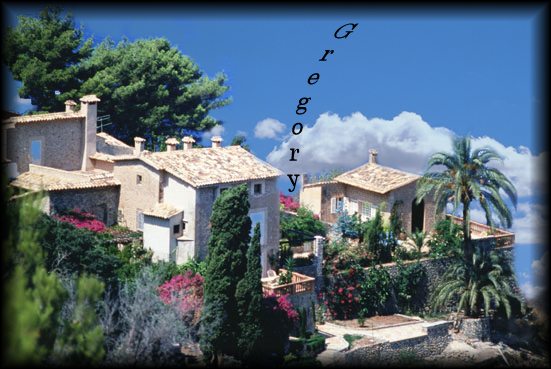
<style>
.page{position:relative;width:551px;height:369px}
.page>*{position:absolute;margin:0}
.t1{font:24px "CenturySchoolbook";color:#000000}
</style>
<div class="page">
<p class="t1" style="left:287px;top:23px;width:72px;height:170px">Gregory</p>
</div>
